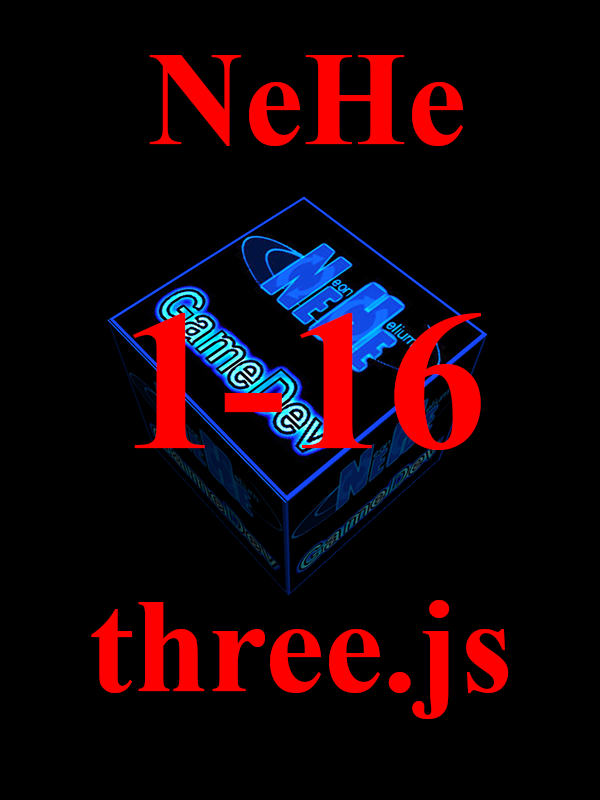
<style>
.page{position:relative;width:600px;height:800px;background:#000000}
.page>*{position:absolute;margin:0}
.t1{font:133.3px "TimesNewRomanPS-BoldMT";color:#ff0000}
.t2{font:200px "TimesNewRomanPS-BoldMT";color:#ff0000}
</style>
<div class="page">
<p class="t1" style="left:149px;top:55px;width:314px;height:91px">NeHe</p>
<p class="t2" style="left:133px;top:313px;width:348px;height:137px">1-16</p>
<p class="t1" style="left:91px;top:600px;width:418px;height:119px">three.js</p>
</div>
